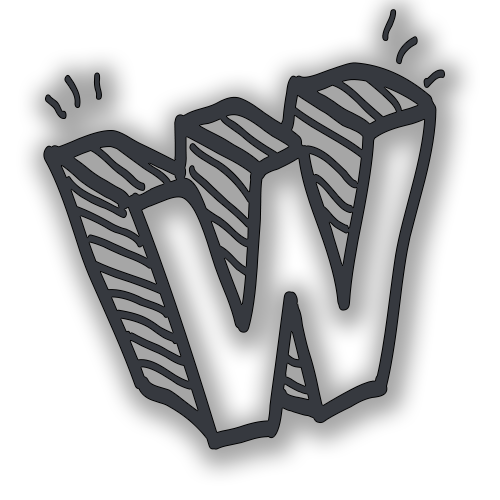
<style>
.page{position:relative;width:500px;height:500px;background:#ffffff}
.page>*{position:absolute;margin:0}
.t1{font:668.6px "Sketch3D";color:#36393f;scale:0.71 1}
</style>
<div class="page">
<p class="t1" style="left:43px;top:9px;width:402px;height:441px">w</p>
</div>
